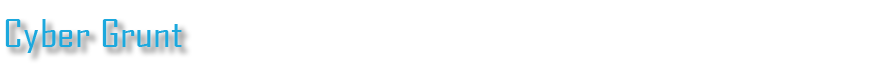
<style>
.page{position:relative;width:875px;height:74px;background:#ffffff}
.page>*{position:absolute;margin:0}
.t1{font:36.1px "AgencyFB-Reg";color:#1ca8dd;scale:1.3 1}
</style>
<div class="page">
<p class="t1" style="left:5px;top:19px;width:177px;height:34px">Cyber Grunt</p>
</div>
